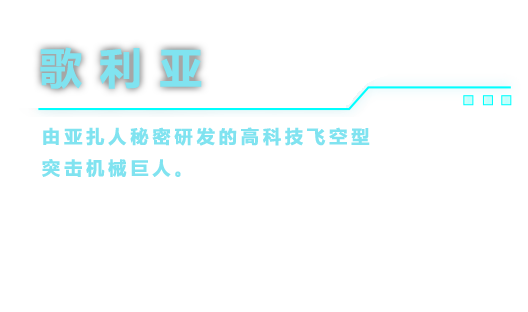
<style>
.page{position:relative;width:528px;height:312px;background:#ffffff}
.page>*{position:absolute;margin:0}
.t1{font:42px "MicrosoftYaHei-Bold";letter-spacing:0.4em;color:#80e3f0;font-weight:bold}
.t2{font:18px "MicrosoftYaHei-Bold";letter-spacing:0.2em;color:#80e3f0;font-weight:bold}
</style>
<div class="page">
<p class="t1" style="left:40px;top:47px;width:162px;height:42px">歌利亚</p>
<p class="t2" style="left:42px;top:127px;width:328px;height:50px">由亚扎人秘密研发的高科技飞空型<br>突击机械巨人。</p>
</div>
